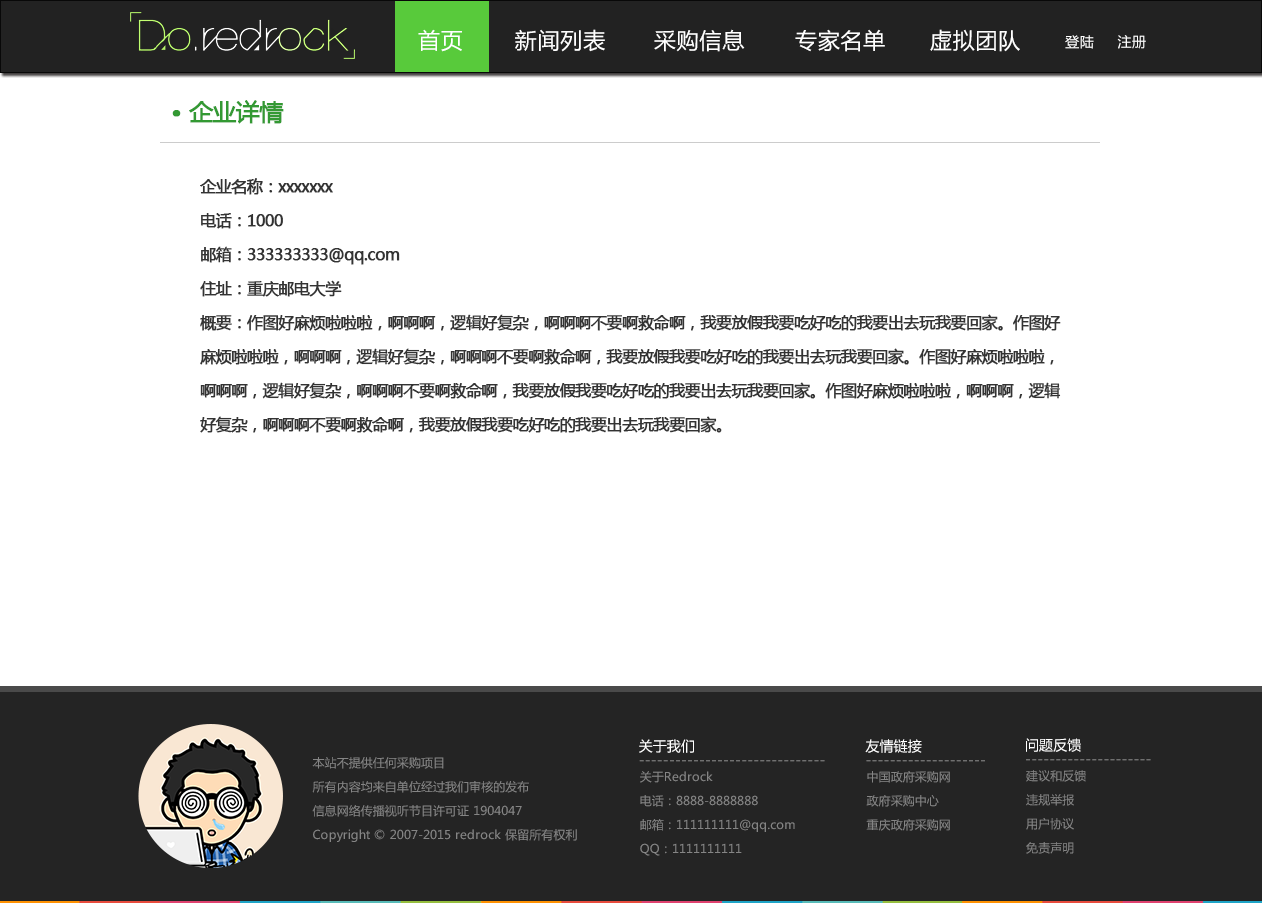
<style>
.page{position:relative;width:1262px;height:903px;background:#ffffff}
.page>*{position:absolute;margin:0}
.t1{font:22px "MicrosoftYaHei";letter-spacing:0.035em;color:#ffffff}
.t2{font:14px "MicrosoftYaHei";letter-spacing:0.035em;color:#ffffff}
.t3{font:24px "MicrosoftYaHei";letter-spacing:-0.05em;color:#339933;font-weight:bold}
.t4{font:48px "MicrosoftYaHei";letter-spacing:-0.05em;color:#339933;font-weight:bold}
.t5{font:16px/34px "MicrosoftYaHei";letter-spacing:-0.05em;color:#333333;font-weight:bold}
.t6{font:14px "MicrosoftYaHei";color:#ffffff}
.t7{font:12px/24px "MicrosoftYaHei";color:#858585}
.t8{font:14px "MicrosoftYaHei";color:#858585}
</style>
<div class="page">
<p class="t1" style="left:418px;top:29px;width:44px;height:23px">首页</p>
<p class="t1" style="left:515px;top:29px;width:90px;height:23px">新闻列表</p>
<p class="t1" style="left:654px;top:29px;width:91px;height:23px">采购信息</p>
<p class="t1" style="left:795px;top:29px;width:90px;height:23px">专家名单</p>
<p class="t1" style="left:930px;top:29px;width:90px;height:23px">虚拟团队</p>
<p class="t2" style="left:1065px;top:35px;width:81px;height:14px">登陆     注册</p>
<p class="t3" style="left:189px;top:100px;width:95px;height:24px">企业详情</p>
<p class="t4" style="left:172px;top:110px;width:9px;height:7px">·</p>
<p class="t5" style="left:200px;top:178px;width:861px;height:255px">企业名称：xxxxxxx<br>电话：1000<br>邮箱：333333333@qq.com<br>住址：重庆邮电大学<br>概要：作图好麻烦啦啦啦，啊啊啊，逻辑好复杂，啊啊啊不要啊救命啊，我要放假我要吃好吃的我要出去玩我要回家。作图好<br>麻烦啦啦啦，啊啊啊，逻辑好复杂，啊啊啊不要啊救命啊，我要放假我要吃好吃的我要出去玩我要回家。作图好麻烦啦啦啦，<br>啊啊啊，逻辑好复杂，啊啊啊不要啊救命啊，我要放假我要吃好吃的我要出去玩我要回家。作图好麻烦啦啦啦，啊啊啊，逻辑<br>好复杂，啊啊啊不要啊救命啊，我要放假我要吃好吃的我要出去玩我要回家。</p>
<p class="t6" style="left:639px;top:739px;width:55px;height:14px">关于我们</p>
<p class="t6" style="left:865px;top:739px;width:57px;height:14px">友情链接</p>
<p class="t6" style="left:1026px;top:738px;width:55px;height:14px">问题反馈</p>
<p class="t7" style="left:312px;top:757px;width:265px;height:85px">本站不提供任何采购项目<br>所有内容均来自单位经过我们审核的发布<br>信息网络传播视听节目许可证 1904047<br>Copyright © 2007-2015 redrock 保留所有权利</p>
<p class="t8" style="left:639px;top:760px;width:186px;height:2px">-------------------------------</p>
<p class="t8" style="left:866px;top:760px;width:119px;height:2px">--------------------</p>
<p class="t8" style="left:1026px;top:759px;width:125px;height:2px">---------------------</p>
<p class="t7" style="left:640px;top:771px;width:155px;height:85px">关于Redrock<br>电话：8888-8888888<br>邮箱：111111111@qq.com<br>QQ：1111111111</p>
<p class="t7" style="left:866px;top:771px;width:84px;height:60px">中国政府采购网<br>政府采购中心<br>重庆政府采购网</p>
<p class="t7" style="left:1026px;top:770px;width:60px;height:84px">建议和反馈<br>违规举报<br>用户协议<br>免责声明</p>
</div>
